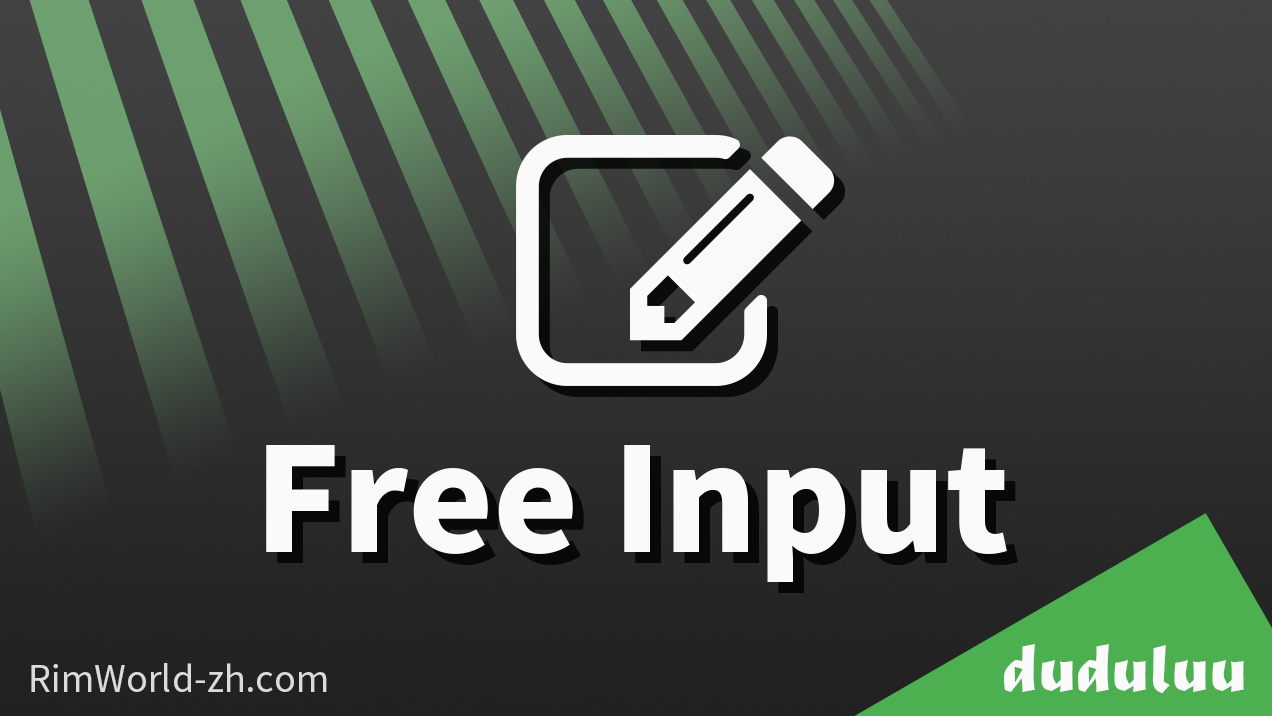
<style>
.page{position:relative;width:1272px;height:716px}
.page>*{position:absolute;margin:0}
.t1{font:144px "NotoSansSC-Black";color:#fafafa}
.t2{font:72px "MaturaMTScriptCapitals";color:#fafafa}
.t3{font:36px "NotoSansSC-Regular";color:#dbdbdb}
</style>
<div class="page">
<p class="t1" style="left:266px;top:445px;width:741px;height:137px">Free Input</p>
<p class="t2" style="left:1004px;top:644px;width:240px;height:49px">duduluu</p>
<p class="t3" style="left:31px;top:663px;width:296px;height:29px">RimWorld-zh.com</p>
</div>
